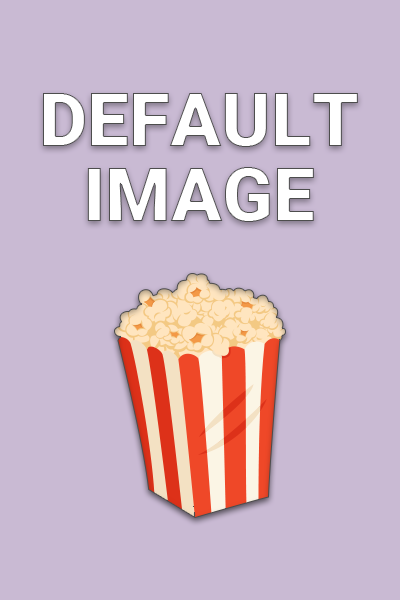
<style>
.page{position:relative;width:400px;height:600px;background:#c9bad3}
.page>*{position:absolute;margin:0}
.t1{font:75px/75px "Roboto-Black";color:#ffffff}
</style>
<div class="page">
<p class="t1" style="left:43px;top:93px;width:315px;height:129px;text-align:center">DEFAULT<br>IMAGE</p>
</div>
